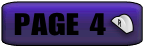
<style>
.page{position:relative;width:144px;height:48px}
.page>*{position:absolute;margin:0}
.t1{font:30.4px "Genuine";letter-spacing:0.02em;color:#000000;scale:1.2 1}
</style>
<div class="page">
<p class="t1" style="left:14px;top:12px;width:92px;height:24px">PAGE 4</p>
</div>
